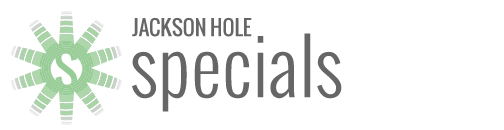
<style>
.page{position:relative;width:504px;height:130px;background:#ffffff}
.page>*{position:absolute;margin:0}
.t1{font:20.8px "Oswald";color:#666666}
.t2{font:76px "Oswald-Light";color:#666666}
</style>
<div class="page">
<p class="t1" style="left:132px;top:17px;width:120px;height:20px">JACKSON HOLE</p>
<p class="t2" style="left:132px;top:33px;width:210px;height:79px">specials</p>
</div>
